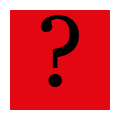
<style>
.page{position:relative;width:120px;height:120px;background:#e30613}
.page>*{position:absolute;margin:0}
.t1{font:100px "Georgia";color:#000000}
</style>
<div class="page">
<p class="t1" style="left:41px;top:15px;width:38px;height:72px">?</p>
</div>
